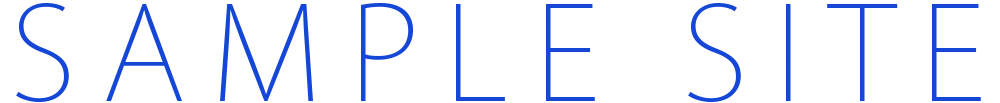
<style>
.page{position:relative;width:1000px;height:103px;background:#ffffff}
.page>*{position:absolute;margin:0}
.t1{font:128.8px "KozGoPro-ExtraLight";letter-spacing:0.2em;color:#1547d7}
</style>
<div class="page">
<p class="t1" style="left:16px;top:3px;width:965px;height:99px">SAMPLE SITE</p>
</div>
